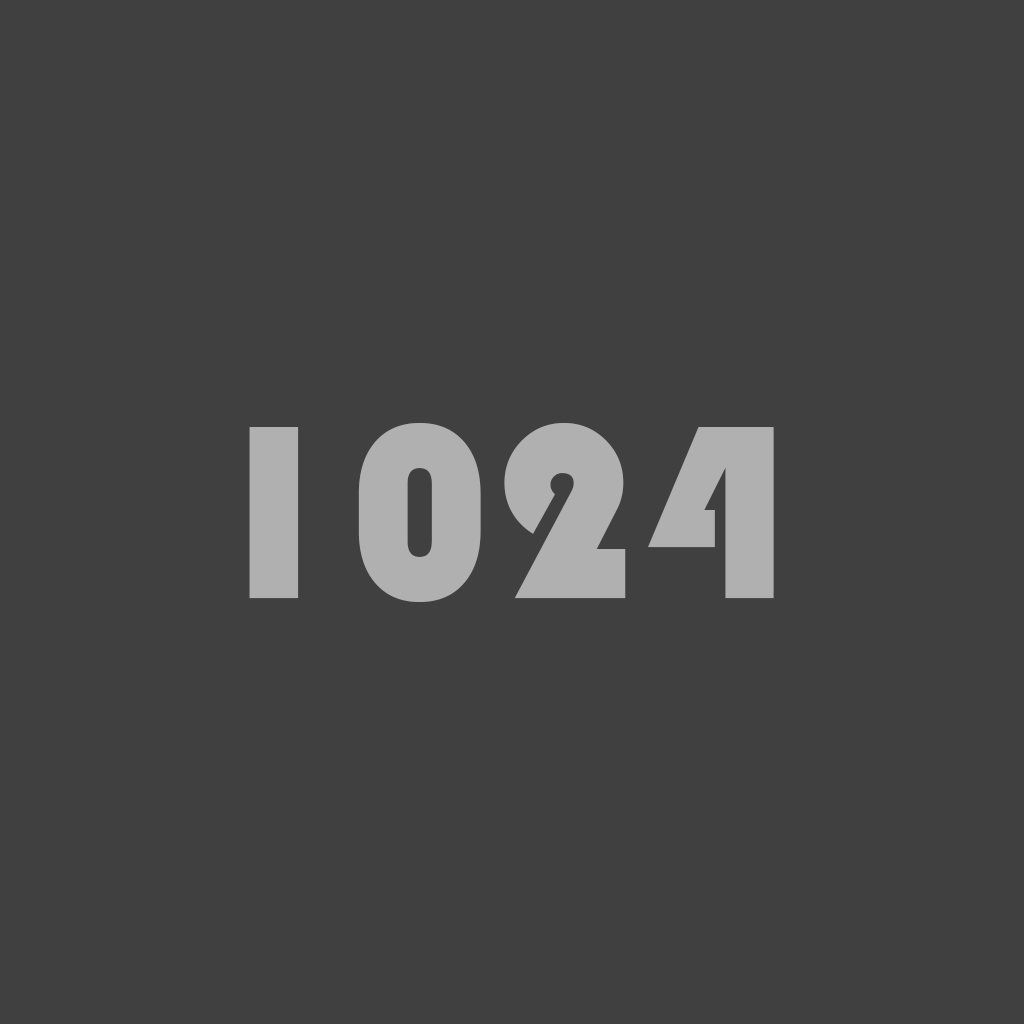
<style>
.page{position:relative;width:1024px;height:1024px;background:#404040}
.page>*{position:absolute;margin:0}
.t1{font:256px "Bauhaus93";color:#b1b0b0}
</style>
<div class="page">
<p class="t1" style="left:249px;top:423px;width:525px;height:179px">1024</p>
</div>
